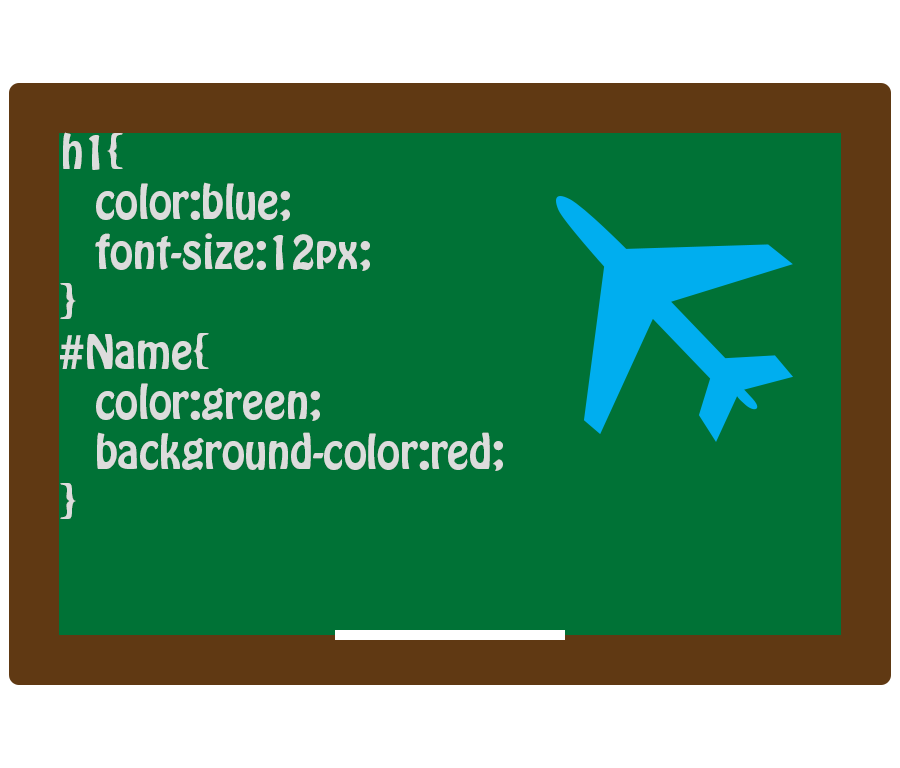
<style>
.page{position:relative;width:900px;height:768px;background:#007236}
.page>*{position:absolute;margin:0}
.t1{font:41.7px "HoboStd";color:#dcdcdc}
</style>
<div class="page">
<p class="t1" style="left:60px;top:132px;width:443px;height:387px">h1{<br> color:blue;<br> font-size:12px;<br>}<br>#Name{<br> color:green;<br> background-color:red;<br>}</p>
</div>
